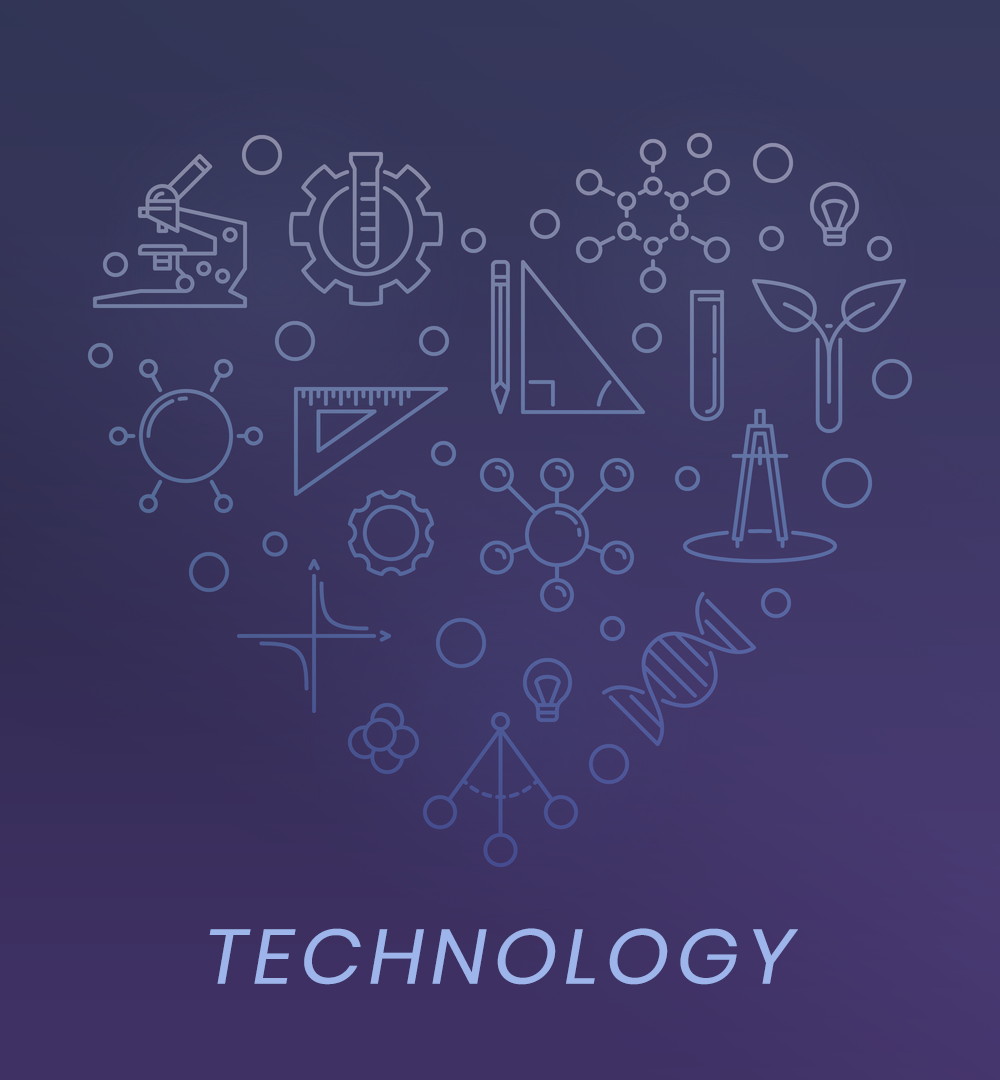
<style>
.page{position:relative;width:1000px;height:1080px}
.page>*{position:absolute;margin:0}
.t1{font:132.8px "Poppins-Regular";letter-spacing:0.075em;color:#9eb5eb;font-style:italic;scale:1.05 1}
</style>
<div class="page">
<p class="t1" style="left:209px;top:928px;width:589px;height:57px">TECHNOLOGY</p>
</div>
